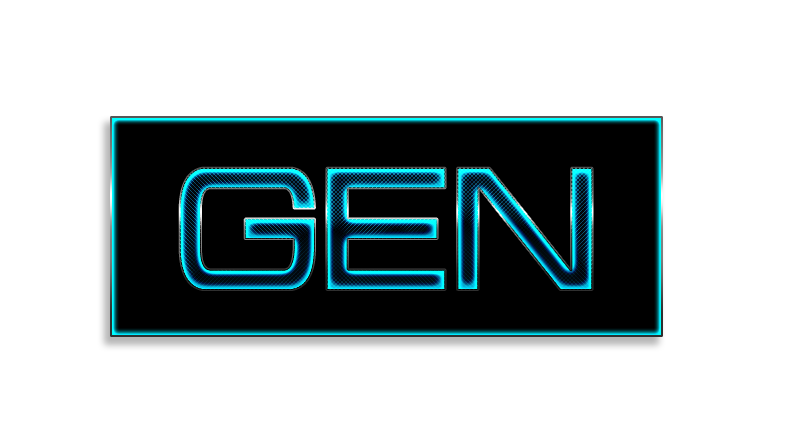
<style>
.page{position:relative;width:812px;height:446px;background:#ffffff}
.page>*{position:absolute;margin:0}
.t1{font:166.6px "Probert-Bold";font-weight:bold}
</style>
<div class="page">
<p class="t1" style="left:179px;top:167px;width:414px;height:123px">GEN</p>
</div>
